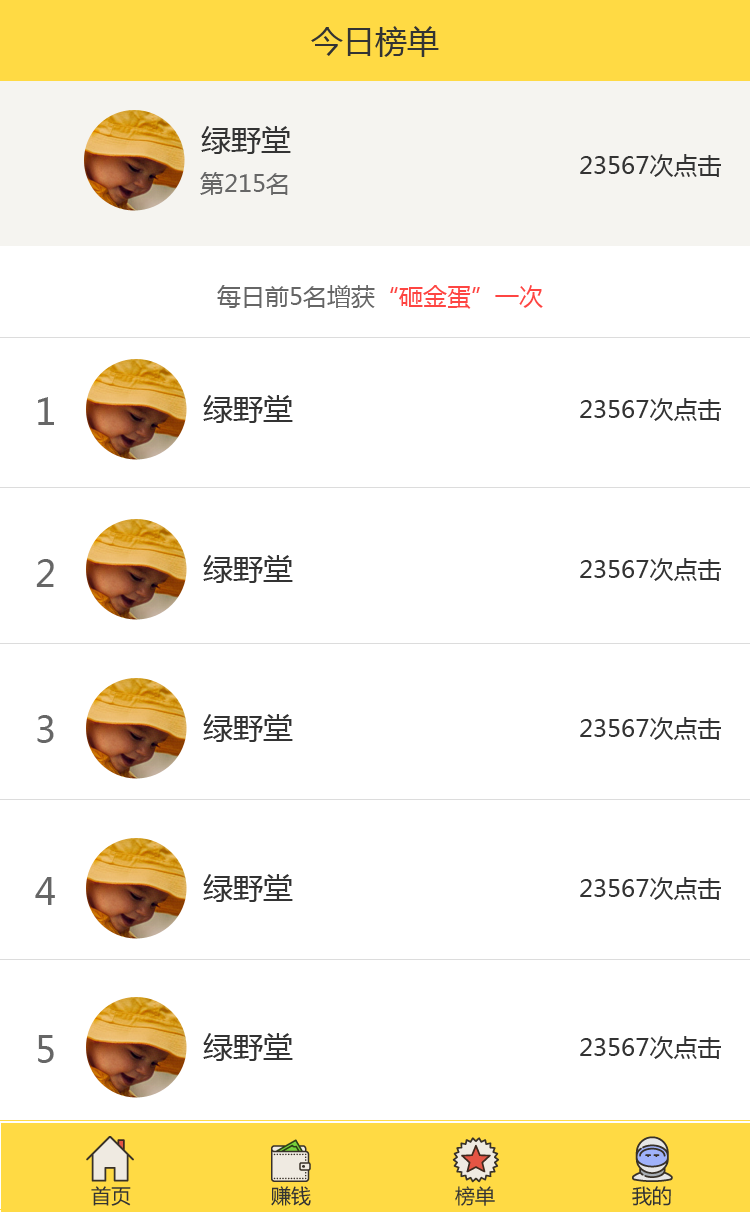
<style>
.page{position:relative;width:750px;height:1212px;background:#ffffff}
.page>*{position:absolute;margin:0}
.t1{font:32px "MicrosoftYaHei";color:#333333}
.t2{font:30px "MicrosoftYaHei";color:#333333}
.t3{font:24px "MicrosoftYaHei";color:#333333}
.t4{font:24px "MicrosoftYaHei";color:#666666}
.t5{font:24px "MicrosoftYaHei";color:#fe4542}
.t6{font:36px "MicrosoftYaHei";color:#666666}
.t7{font:20px "MicrosoftYaHei";color:#333333}
</style>
<div class="page">
<p class="t1" style="left:311px;top:26px;width:128px;height:31px">今日榜单</p>
<p class="t2" style="left:201px;top:126px;width:90px;height:28px">绿野堂</p>
<p class="t3" style="left:580px;top:154px;width:141px;height:23px">23567次点击</p>
<p class="t4" style="left:200px;top:172px;width:88px;height:23px">第215名</p>
<p class="t4" style="left:217px;top:285px;width:326px;height:24px">每日前5名增获<span class="t5">“砸金蛋”一次</span></p>
<p class="t6" style="left:38px;top:397px;width:16px;height:28px">1</p>
<p class="t2" style="left:203px;top:395px;width:90px;height:28px">绿野堂</p>
<p class="t3" style="left:580px;top:398px;width:141px;height:23px">23567次点击</p>
<p class="t2" style="left:203px;top:555px;width:90px;height:28px">绿野堂</p>
<p class="t3" style="left:580px;top:558px;width:141px;height:23px">23567次点击</p>
<p class="t6" style="left:36px;top:559px;width:18px;height:28px">2</p>
<p class="t6" style="left:37px;top:715px;width:17px;height:28px">3</p>
<p class="t2" style="left:203px;top:714px;width:90px;height:28px">绿野堂</p>
<p class="t3" style="left:580px;top:717px;width:141px;height:23px">23567次点击</p>
<p class="t6" style="left:35px;top:877px;width:20px;height:28px">4</p>
<p class="t2" style="left:203px;top:874px;width:90px;height:28px">绿野堂</p>
<p class="t3" style="left:580px;top:877px;width:141px;height:23px">23567次点击</p>
<p class="t6" style="left:38px;top:1035px;width:16px;height:28px">5</p>
<p class="t2" style="left:203px;top:1033px;width:90px;height:28px">绿野堂</p>
<p class="t3" style="left:580px;top:1036px;width:141px;height:23px">23567次点击</p>
<p class="t7" style="left:91px;top:1186px;width:40px;height:20px">首页</p>
<p class="t7" style="left:271px;top:1186px;width:40px;height:20px">赚钱</p>
<p class="t7" style="left:455px;top:1186px;width:40px;height:20px">榜单</p>
<p class="t7" style="left:632px;top:1186px;width:39px;height:20px">我的</p>
</div>
